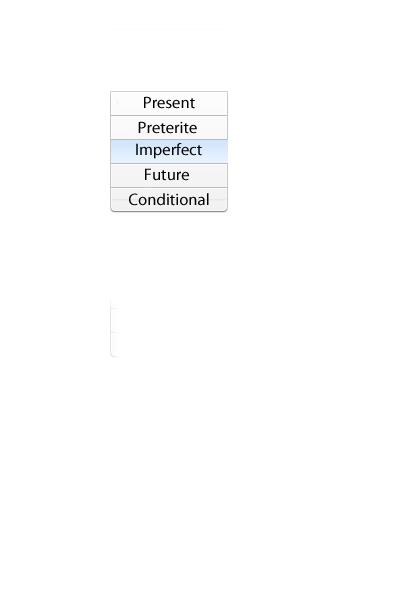
<style>
.page{position:relative;width:400px;height:600px;background:#ffffff}
.page>*{position:absolute;margin:0}
.t1{font:16.7px "MyriadPro-Regular";color:#000000}
</style>
<div class="page">
<p class="t1" style="left:144px;top:96px;width:51px;height:13px">Present</p>
<p class="t1" style="left:138px;top:121px;width:59px;height:13px">Preterite</p>
<p class="t1" style="left:136px;top:143px;width:66px;height:16px">Imperfect</p>
<p class="t1" style="left:145px;top:168px;width:44px;height:13px">Future</p>
<p class="t1" style="left:129px;top:193px;width:80px;height:13px">Conditional</p>
</div>
